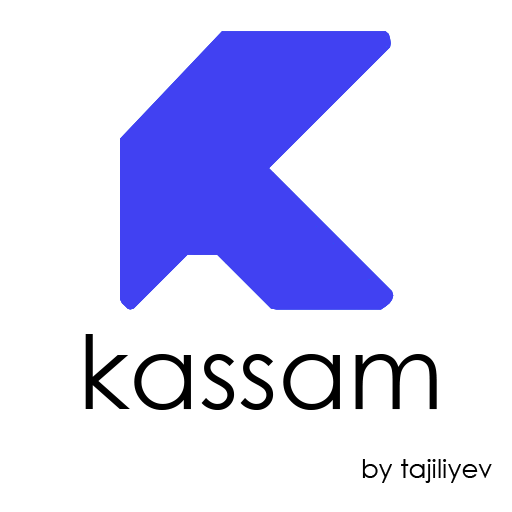
<style>
.page{position:relative;width:512px;height:512px;background:#ffffff}
.page>*{position:absolute;margin:0}
.t1{font:102px "CenturyGothic";color:#000000}
.t2{font:26px "CenturyGothic";color:#000000}
</style>
<div class="page">
<p class="t1" style="left:85px;top:334px;width:352px;height:76px">kassam</p>
<p class="t2" style="left:362px;top:459px;width:130px;height:24px">by tajiliyev</p>
</div>
